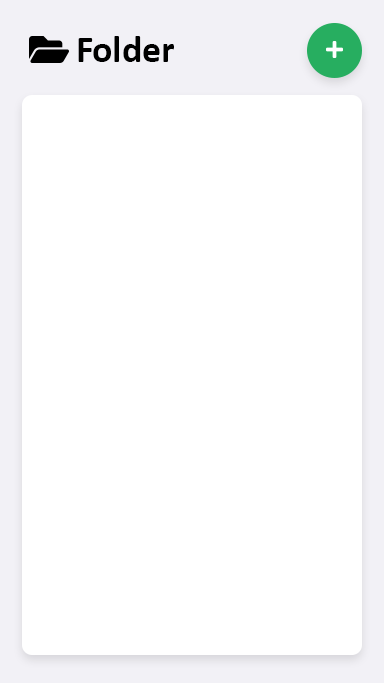
<style>
.page{position:relative;width:384px;height:683px;background:#ffffff}
.page>*{position:absolute;margin:0}
.t1{font:37.5px "Calibri-Bold";color:#000000}
</style>
<div class="page">
<p class="t1" style="left:78px;top:36px;width:96px;height:26px">Folder</p>
</div>
